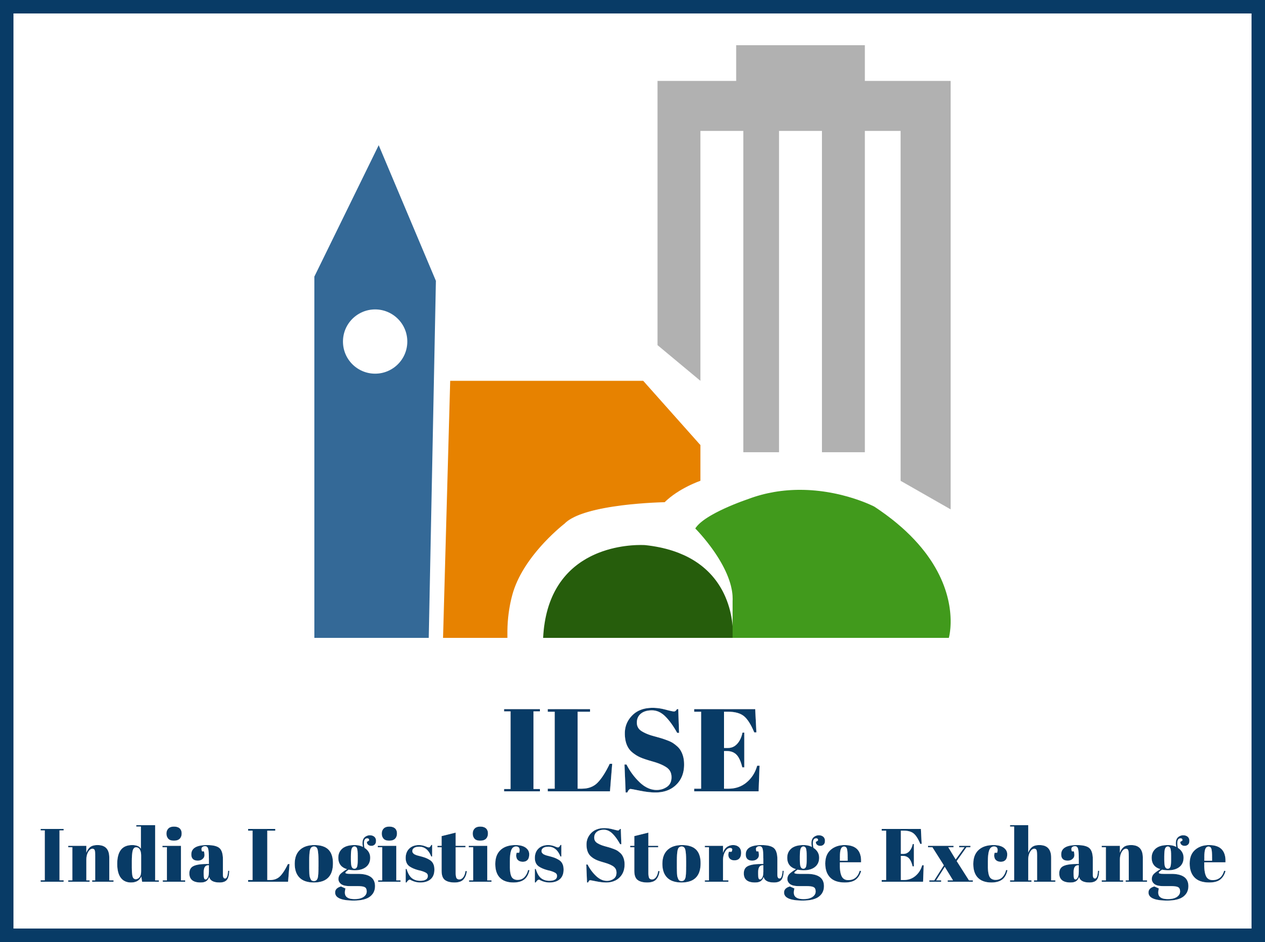
<style>
.page{position:relative;width:1265px;height:942px;background:#ffffff}
.page>*{position:absolute;margin:0}
.t1{font:75.4px "AbrilFatface-Regular";letter-spacing:0.025em;color:#083b66}
.t2{font:117.4px "AbrilFatface-Regular";letter-spacing:0.025em;color:#083b66;text-transform:uppercase}
</style>
<div class="page">
<p class="t1" style="left:40px;top:708px;width:1186px;height:193px;text-align:center"><span class="t2">ILSE<br></span>India Logistics Storage Exchange</p>
</div>
